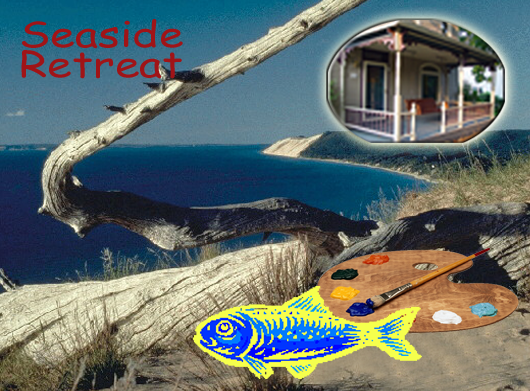
<style>
.page{position:relative;width:530px;height:391px}
.page>*{position:absolute;margin:0}
.t1{font:36px/30px "ComicSansMS";color:#a01417;scale:1.25 1}
</style>
<div class="page">
<p class="t1" style="left:21px;top:19px;width:162px;height:60px">Seaside<br>Retreat</p>
</div>
